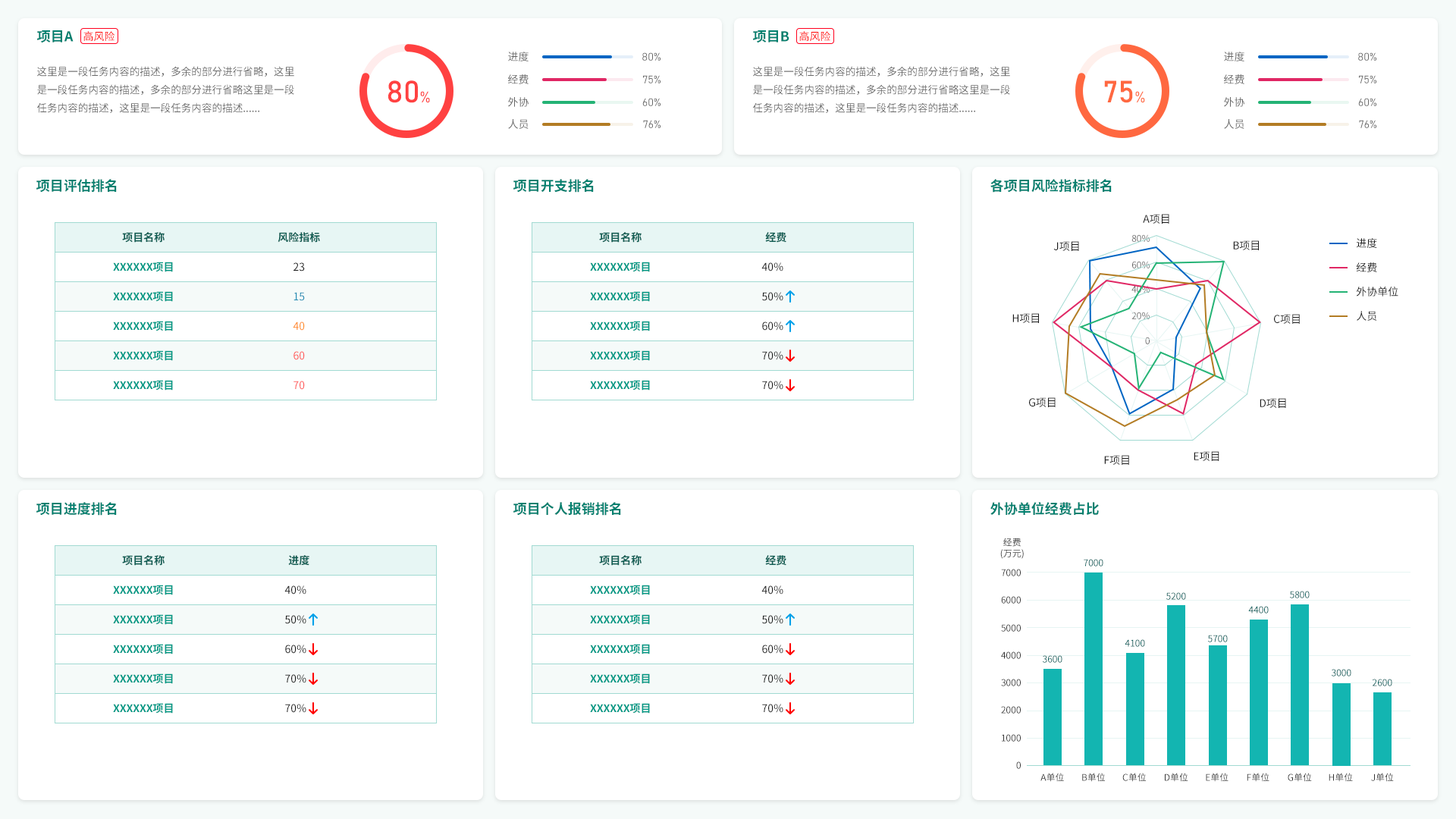
<style>
.page{position:relative;width:1456px;height:819px;background:#ffffff}
.page>*{position:absolute;margin:0}
.t1{font:13.6px "NotoSansHans-Bold";color:#00806f}
.t2{font:10.6px "NotoSansHans-Regular";color:#666666}
.t3{font:10.6px "Bahnschrift";color:#666666}
.t4{font:10.6px/18.2px "NotoSansHans-Regular";color:#666666}
.t5{font:30.3px "Bahnschrift";color:#ff4141}
.t6{font:15.2px "Bahnschrift";color:#ff4141}
.t7{font:30.3px "Bahnschrift";color:#ff6840}
.t8{font:15.2px "Bahnschrift";color:#ff6840}
.t9{font:10.6px "NotoSansHans-Regular";color:#1a1a1a}
.t10{font:10.6px "NotoSansHans-Bold";color:#0f5d53}
.t11{font:9.1px "NotoSansHans-Regular"}
.t12{font:10.6px "NotoSansHans-Bold";color:#009985}
.t13{font:9.1px "NotoSansHans-Regular";color:#666666}
.t14{font:10.6px "NotoSansHans-Regular";color:#248cb3}
.t15{font:9.1px "NotoSansHans-Regular";color:#875565}
.t16{font:10.6px "NotoSansHans-Regular";color:#ff8c26}
.t17{font:10.6px "NotoSansHans-Regular";color:#ff5a5a}
.t18{font:9.1px "NotoSansHans-Regular";color:#333333}
.t19{font:9.1px "NotoSansHans-Regular";color:#005c5a}
</style>
<div class="page">
<p class="t1" style="left:37px;top:30px;width:37px;height:13px">项目A</p>
<p class="t1" style="left:753px;top:30px;width:36px;height:13px">项目B</p>
<p class="t2" style="left:508px;top:52px;width:21px;height:9px">进度</p>
<p class="t3" style="left:642px;top:52px;width:18px;height:9px">80%</p>
<p class="t2" style="left:1224px;top:52px;width:20px;height:9px">进度</p>
<p class="t3" style="left:1358px;top:52px;width:18px;height:9px">80%</p>
<p class="t4" style="left:37px;top:66px;width:257px;height:47px">这里是一段任务内容的描述，多余的部分进行省略，这里是一段任务内容的描述，多余的部分进行省略这里是一段任务内容的描述，这里是一段任务内容的描述......</p>
<p class="t4" style="left:753px;top:66px;width:257px;height:47px">这里是一段任务内容的描述，多余的部分进行省略，这里是一段任务内容的描述，多余的部分进行省略这里是一段任务内容的描述，这里是一段任务内容的描述......</p>
<p class="t2" style="left:508px;top:74px;width:21px;height:10px">经费</p>
<p class="t3" style="left:643px;top:75px;width:17px;height:8px">75%</p>
<p class="t2" style="left:1224px;top:74px;width:20px;height:10px">经费</p>
<p class="t3" style="left:1359px;top:75px;width:17px;height:8px">75%</p>
<p class="t5" style="left:388px;top:80px;width:42px;height:23px">80<span class="t6">%</span></p>
<p class="t7" style="left:1104px;top:80px;width:41px;height:23px">75<span class="t8">%</span></p>
<p class="t2" style="left:508px;top:97px;width:21px;height:10px">外协</p>
<p class="t3" style="left:642px;top:98px;width:18px;height:8px">60%</p>
<p class="t2" style="left:1224px;top:97px;width:20px;height:10px">外协</p>
<p class="t3" style="left:1358px;top:98px;width:18px;height:8px">60%</p>
<p class="t2" style="left:508px;top:119px;width:21px;height:10px">人员</p>
<p class="t3" style="left:643px;top:120px;width:17px;height:8px">76%</p>
<p class="t2" style="left:1224px;top:119px;width:20px;height:10px">人员</p>
<p class="t3" style="left:1359px;top:120px;width:17px;height:8px">76%</p>
<p class="t1" style="left:36px;top:179px;width:81px;height:14px">项目评估排名</p>
<p class="t1" style="left:513px;top:179px;width:81px;height:14px">项目开支排名</p>
<p class="t1" style="left:990px;top:179px;width:122px;height:14px">各项目风险指标排名</p>
<p class="t9" style="left:1143px;top:214px;width:26px;height:10px">A项目</p>
<p class="t10" style="left:122px;top:232px;width:43px;height:11px">项目名称</p>
<p class="t10" style="left:278px;top:232px;width:42px;height:11px">风险指标</p>
<p class="t10" style="left:599px;top:232px;width:43px;height:11px">项目名称</p>
<p class="t10" style="left:765px;top:232px;width:21px;height:11px">经费</p>
<p class="t9" style="left:1053px;top:241px;width:26px;height:10px">J项目</p>
<p class="t11" style="left:1131px;top:234px;width:19px;height:8px">80%</p>
<p class="t9" style="left:1233px;top:240px;width:26px;height:10px">B项目</p>
<p class="t9" style="left:1357px;top:238px;width:20px;height:10px">进度</p>
<p class="t12" style="left:113px;top:262px;width:60px;height:10px">XXXXXX项目</p>
<p class="t9" style="left:293px;top:262px;width:12px;height:9px">23</p>
<p class="t12" style="left:590px;top:262px;width:60px;height:10px">XXXXXX项目</p>
<p class="t9" style="left:761px;top:262px;width:22px;height:9px">40%</p>
<p class="t13" style="left:1132px;top:261px;width:18px;height:7px">60%</p>
<p class="t9" style="left:1356px;top:262px;width:21px;height:10px">经费</p>
<p class="t12" style="left:113px;top:291px;width:60px;height:11px">XXXXXX项目</p>
<p class="t14" style="left:293px;top:292px;width:12px;height:9px">15</p>
<p class="t12" style="left:590px;top:291px;width:60px;height:11px">XXXXXX项目</p>
<p class="t9" style="left:762px;top:292px;width:21px;height:9px">50%</p>
<p class="t15" style="left:1131px;top:285px;width:19px;height:8px">40%</p>
<p class="t9" style="left:1356px;top:286px;width:42px;height:11px">外协单位</p>
<p class="t9" style="left:1012px;top:313px;width:27px;height:10px">H项目</p>
<p class="t11" style="left:1131px;top:312px;width:19px;height:7px">20%</p>
<p class="t9" style="left:1274px;top:314px;width:26px;height:10px">C项目</p>
<p class="t9" style="left:1357px;top:311px;width:20px;height:10px">人员</p>
<p class="t12" style="left:113px;top:321px;width:60px;height:10px">XXXXXX项目</p>
<p class="t16" style="left:293px;top:322px;width:12px;height:9px">40</p>
<p class="t12" style="left:590px;top:321px;width:60px;height:10px">XXXXXX项目</p>
<p class="t9" style="left:762px;top:322px;width:21px;height:9px">60%</p>
<p class="t13" style="left:1145px;top:337px;width:5px;height:7px">0</p>
<p class="t12" style="left:113px;top:350px;width:60px;height:11px">XXXXXX项目</p>
<p class="t17" style="left:293px;top:351px;width:12px;height:9px">60</p>
<p class="t12" style="left:590px;top:350px;width:60px;height:11px">XXXXXX项目</p>
<p class="t9" style="left:762px;top:351px;width:21px;height:9px">70%</p>
<p class="t12" style="left:113px;top:380px;width:60px;height:11px">XXXXXX项目</p>
<p class="t17" style="left:293px;top:381px;width:12px;height:9px">70</p>
<p class="t12" style="left:590px;top:380px;width:60px;height:11px">XXXXXX项目</p>
<p class="t9" style="left:762px;top:381px;width:21px;height:9px">70%</p>
<p class="t9" style="left:1029px;top:397px;width:27px;height:10px">G项目</p>
<p class="t9" style="left:1260px;top:398px;width:26px;height:10px">D项目</p>
<p class="t9" style="left:1104px;top:455px;width:25px;height:10px">F项目</p>
<p class="t9" style="left:1194px;top:451px;width:25px;height:10px">E项目</p>
<p class="t1" style="left:36px;top:502px;width:81px;height:14px">项目进度排名</p>
<p class="t1" style="left:513px;top:502px;width:108px;height:14px">项目个人报销排名</p>
<p class="t1" style="left:990px;top:502px;width:109px;height:14px">外协单位经费占比</p>
<p class="t18" style="left:1000px;top:538px;width:24px;height:21px;text-align:center">经费<br>(万元)</p>
<p class="t10" style="left:122px;top:555px;width:43px;height:11px">项目名称</p>
<p class="t10" style="left:288px;top:555px;width:21px;height:11px">进度</p>
<p class="t10" style="left:599px;top:555px;width:43px;height:11px">项目名称</p>
<p class="t10" style="left:765px;top:555px;width:21px;height:11px">经费</p>
<p class="t18" style="left:1001px;top:569px;width:20px;height:7px">7000</p>
<p class="t19" style="left:1084px;top:559px;width:19px;height:7px">7000</p>
<p class="t12" style="left:113px;top:585px;width:60px;height:10px">XXXXXX项目</p>
<p class="t9" style="left:284px;top:585px;width:22px;height:10px">40%</p>
<p class="t12" style="left:590px;top:585px;width:60px;height:10px">XXXXXX项目</p>
<p class="t9" style="left:761px;top:585px;width:22px;height:10px">40%</p>
<p class="t19" style="left:1166px;top:592px;width:20px;height:8px">5200</p>
<p class="t19" style="left:1290px;top:591px;width:20px;height:7px">5800</p>
<p class="t18" style="left:1001px;top:596px;width:20px;height:8px">6000</p>
<p class="t19" style="left:1248px;top:606px;width:21px;height:7px">4400</p>
<p class="t12" style="left:113px;top:614px;width:60px;height:11px">XXXXXX项目</p>
<p class="t9" style="left:285px;top:615px;width:21px;height:9px">50%</p>
<p class="t12" style="left:590px;top:614px;width:60px;height:11px">XXXXXX项目</p>
<p class="t9" style="left:762px;top:615px;width:21px;height:9px">50%</p>
<p class="t18" style="left:1001px;top:624px;width:20px;height:8px">5000</p>
<p class="t19" style="left:1125px;top:639px;width:20px;height:8px">4100</p>
<p class="t19" style="left:1208px;top:635px;width:20px;height:7px">5700</p>
<p class="t12" style="left:113px;top:644px;width:60px;height:10px">XXXXXX项目</p>
<p class="t9" style="left:285px;top:645px;width:21px;height:9px">60%</p>
<p class="t12" style="left:590px;top:644px;width:60px;height:10px">XXXXXX项目</p>
<p class="t9" style="left:762px;top:645px;width:21px;height:9px">60%</p>
<p class="t18" style="left:1001px;top:651px;width:20px;height:8px">4000</p>
<p class="t19" style="left:1043px;top:655px;width:19px;height:8px">3600</p>
<p class="t12" style="left:113px;top:673px;width:60px;height:11px">XXXXXX项目</p>
<p class="t9" style="left:285px;top:674px;width:21px;height:9px">70%</p>
<p class="t12" style="left:590px;top:673px;width:60px;height:11px">XXXXXX项目</p>
<p class="t9" style="left:762px;top:674px;width:21px;height:9px">70%</p>
<p class="t19" style="left:1332px;top:669px;width:19px;height:7px">3000</p>
<p class="t18" style="left:1001px;top:679px;width:20px;height:7px">3000</p>
<p class="t19" style="left:1373px;top:679px;width:19px;height:7px">2600</p>
<p class="t12" style="left:113px;top:703px;width:60px;height:11px">XXXXXX项目</p>
<p class="t9" style="left:285px;top:704px;width:21px;height:9px">70%</p>
<p class="t12" style="left:590px;top:703px;width:60px;height:11px">XXXXXX项目</p>
<p class="t9" style="left:762px;top:704px;width:21px;height:9px">70%</p>
<p class="t18" style="left:1001px;top:706px;width:20px;height:8px">2000</p>
<p class="t18" style="left:1002px;top:734px;width:19px;height:8px">1000</p>
<p class="t18" style="left:1016px;top:761px;width:5px;height:8px">0</p>
<p class="t18" style="left:1040px;top:773px;width:24px;height:9px">A单位</p>
<p class="t11" style="left:1082px;top:773px;width:23px;height:9px">B单位</p>
<p class="t18" style="left:1122px;top:773px;width:24px;height:9px">C单位</p>
<p class="t18" style="left:1165px;top:773px;width:23px;height:9px">D单位</p>
<p class="t18" style="left:1206px;top:773px;width:22px;height:9px">E单位</p>
<p class="t11" style="left:1247px;top:773px;width:22px;height:9px">F单位</p>
<p class="t18" style="left:1288px;top:773px;width:24px;height:9px">G单位</p>
<p class="t18" style="left:1329px;top:773px;width:24px;height:9px">H单位</p>
<p class="t18" style="left:1371px;top:773px;width:23px;height:9px">J单位</p>
</div>
